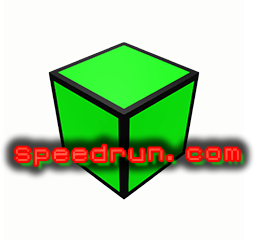
<style>
.page{position:relative;width:255px;height:240px;background:#fdfdfb}
.page>*{position:absolute;margin:0}
.t1{font:30.4px "Roentgen-NBP";color:#ff5540}
</style>
<div class="page">
<p class="t1" style="left:15px;top:145px;width:224px;height:20px">Speedrun.com</p>
</div>
